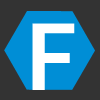
<style>
.page{position:relative;width:100px;height:100px;background:#333333}
.page>*{position:absolute;margin:0}
.t1{font:92px "Lato-Bold";color:#ffffff}
</style>
<div class="page">
<p class="t1" style="left:32px;top:23px;width:43px;height:67px">F</p>
</div>
